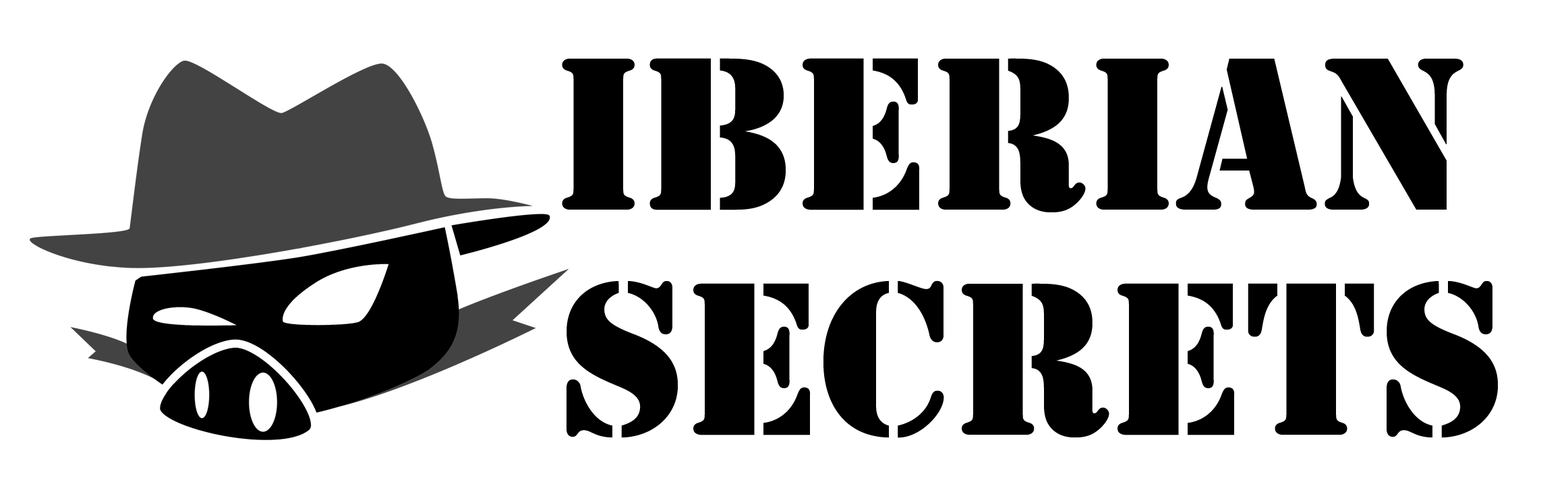
<style>
.page{position:relative;width:1568px;height:490px;background:#ffffff}
.page>*{position:absolute;margin:0}
.t1{font:202.3px "StencilStd";color:#000000;text-transform:uppercase}
</style>
<div class="page">
<p class="t1" style="left:562px;top:58px;width:901px;height:154px">Iberian</p>
<p class="t1" style="left:567px;top:281px;width:931px;height:157px">secrets</p>
</div>
